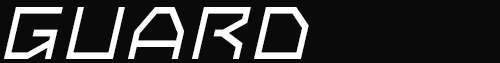
<style>
.page{position:relative;width:500px;height:63px;background:#0a0a0a}
.page>*{position:absolute;margin:0}
.t1{font:61px "7THDR2020ThinRegular";letter-spacing:0.16em;color:#ffffff;scale:0.88 1}
</style>
<div class="page">
<p class="t1" style="left:4px;top:7px;width:305px;height:52px">guard</p>
</div>
